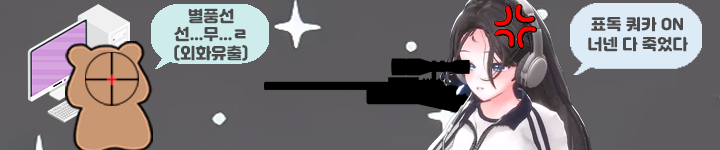
<style>
.page{position:relative;width:720px;height:150px}
.page>*{position:absolute;margin:0}
.t1{font:15.5px/18.7px "Jalnan";color:#4b4b4b}
.t2{font:15.3px/20.4px "Jalnan";color:#4b4b4b}
</style>
<div class="page">
<p class="t1" style="left:174px;top:8px;width:74px;height:53px;text-align:center">별풍선<br>선...무...ㄹ<br>(외화유출)</p>
<p class="t2" style="left:588px;top:16px;width:100px;height:36px;text-align:center">표독 쿼카 ON<br>너넨 다 죽었다</p>
</div>
